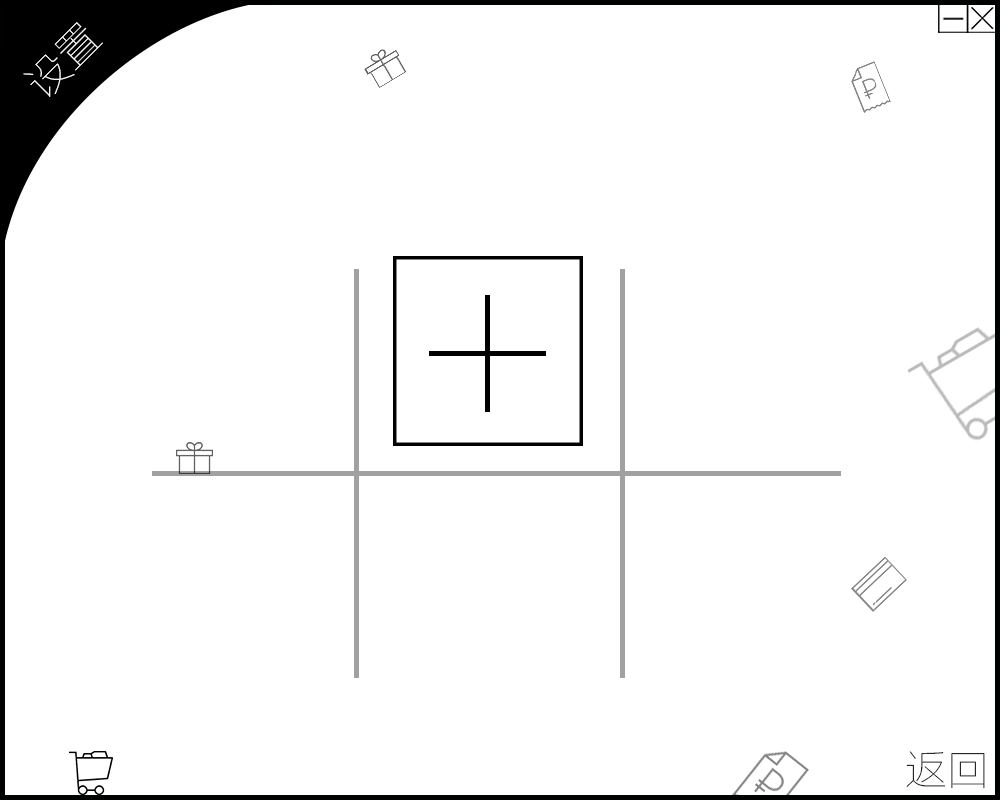
<style>
.page{position:relative;width:1000px;height:800px;background:#ffffff}
.page>*{position:absolute;margin:0}
.t1{font:41.7px "FZLTCXHJW--GB1-0";color:#ffffff}
.t2{font:41.7px "FZLTCXHJW--GB1-0"}
</style>
<div class="page">
<p class="t1" style="left:23px;top:22px;width:80px;height:75px;rotate:-45deg">设置</p>
<p class="t2" style="left:906px;top:751px;width:79px;height:38px">返回</p>
</div>
